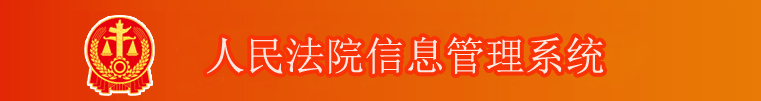
<style>
.page{position:relative;width:761px;height:101px}
.page>*{position:absolute;margin:0}
.t1{font:40px "SimSun";color:#fae8e2}
</style>
<div class="page">
<p class="t1" style="left:206px;top:37px;width:398px;height:38px">人民法院信息管理系统</p>
</div>
